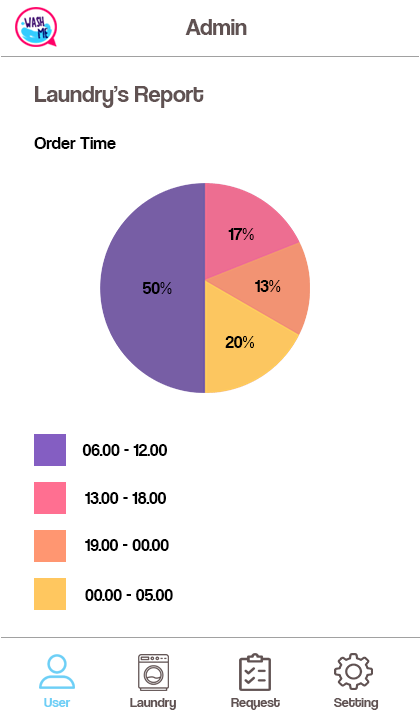
<style>
.page{position:relative;width:420px;height:720px;background:#ffffff}
.page>*{position:absolute;margin:0}
.t1{font:24px "CoolveticaRg-Regular";color:#605252}
.t2{font:18px "CoolveticaRg-Regular";color:#000000}
.t3{font:14px "CoolveticaRg-Regular";color:#6dcff6}
.t4{font:14px "CoolveticaRg-Regular";color:#605252}
</style>
<div class="page">
<p class="t1" style="left:185px;top:19px;width:62px;height:16px">Admin</p>
<p class="t1" style="left:35px;top:86px;width:169px;height:22px">Laundry’s Report</p>
<p class="t2" style="left:34px;top:137px;width:82px;height:12px">Order Time</p>
<p class="t2" style="left:228px;top:228px;width:26px;height:12px">17%</p>
<p class="t2" style="left:255px;top:280px;width:26px;height:12px">13%</p>
<p class="t2" style="left:143px;top:282px;width:29px;height:12px">50%</p>
<p class="t2" style="left:225px;top:336px;width:29px;height:12px">20%</p>
<p class="t2" style="left:82px;top:444px;width:85px;height:12px">06.00 - 12.00</p>
<p class="t2" style="left:85px;top:492px;width:81px;height:12px">13.00 - 18.00</p>
<p class="t2" style="left:85px;top:539px;width:84px;height:12px">19.00 - 00.00</p>
<p class="t2" style="left:85px;top:589px;width:88px;height:12px">00.00 - 05.00</p>
<p class="t3" style="left:44px;top:698px;width:27px;height:9px">User</p>
<p class="t4" style="left:130px;top:698px;width:46px;height:12px">Laundry</p>
<p class="t4" style="left:231px;top:698px;width:49px;height:12px">Request</p>
<p class="t4" style="left:334px;top:698px;width:45px;height:12px">Setting</p>
</div>
